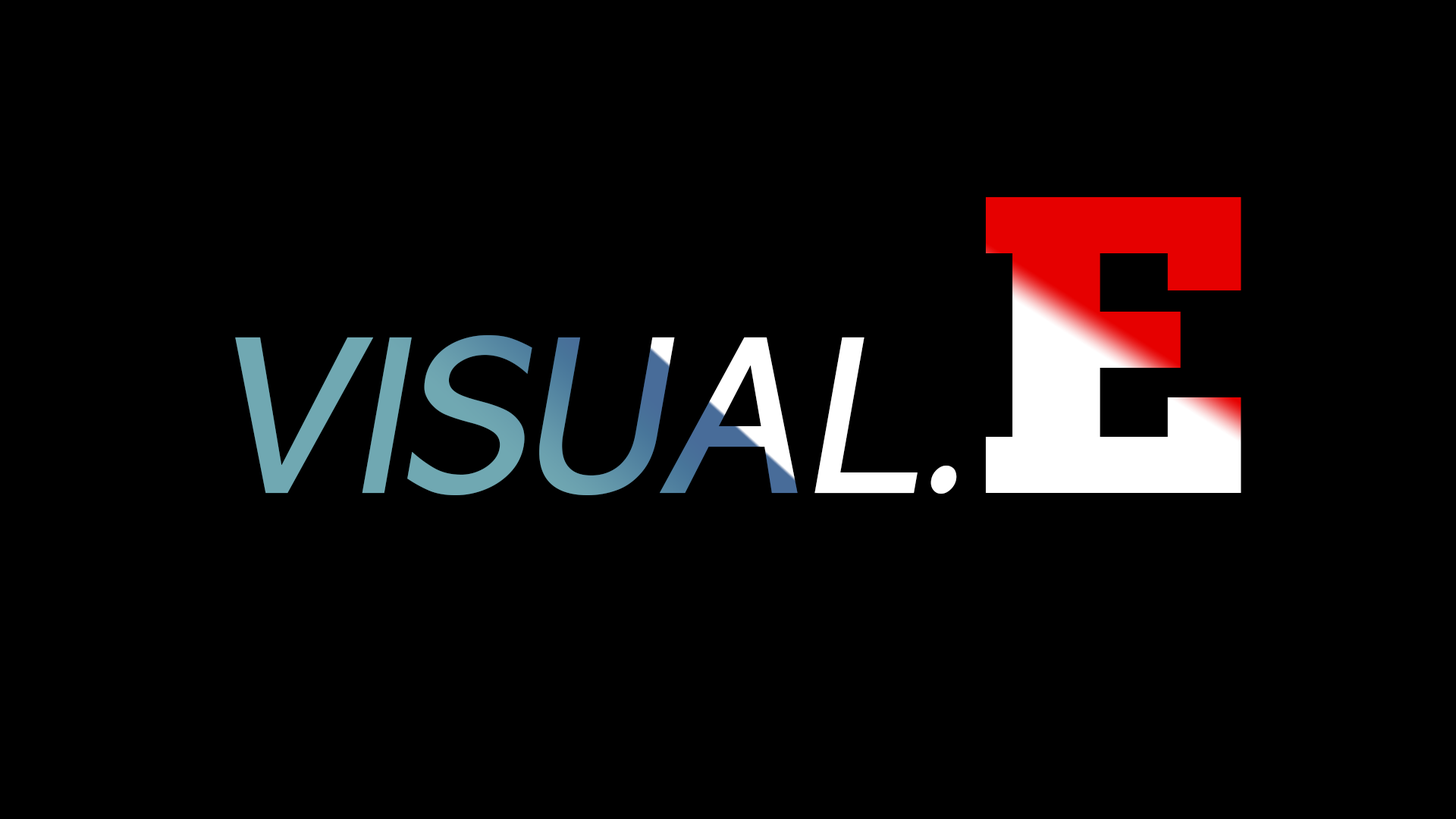
<style>
.page{position:relative;width:1456px;height:819px;background:#000000}
.page>*{position:absolute;margin:0}
.t1{font:227.5px "AbadiMT";font-style:italic}
</style>
<div class="page">
<p class="t1" style="left:235px;top:334px;width:722px;height:161px">VISUAL.</p>
</div>
